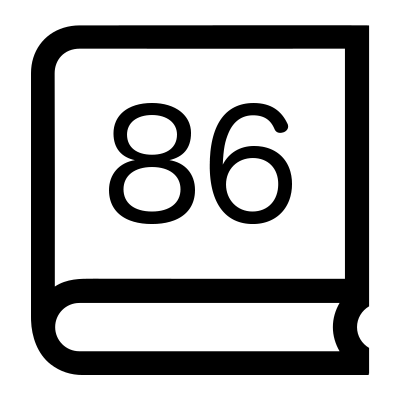
<style>
.page{position:relative;width:400px;height:400px;background:#ffffff}
.page>*{position:absolute;margin:0}
.t1{font:150px "HiraMaruProN-W4";color:#000000}
</style>
<div class="page">
<p class="t1" style="left:109px;top:103px;width:183px;height:121px">86</p>
</div>
